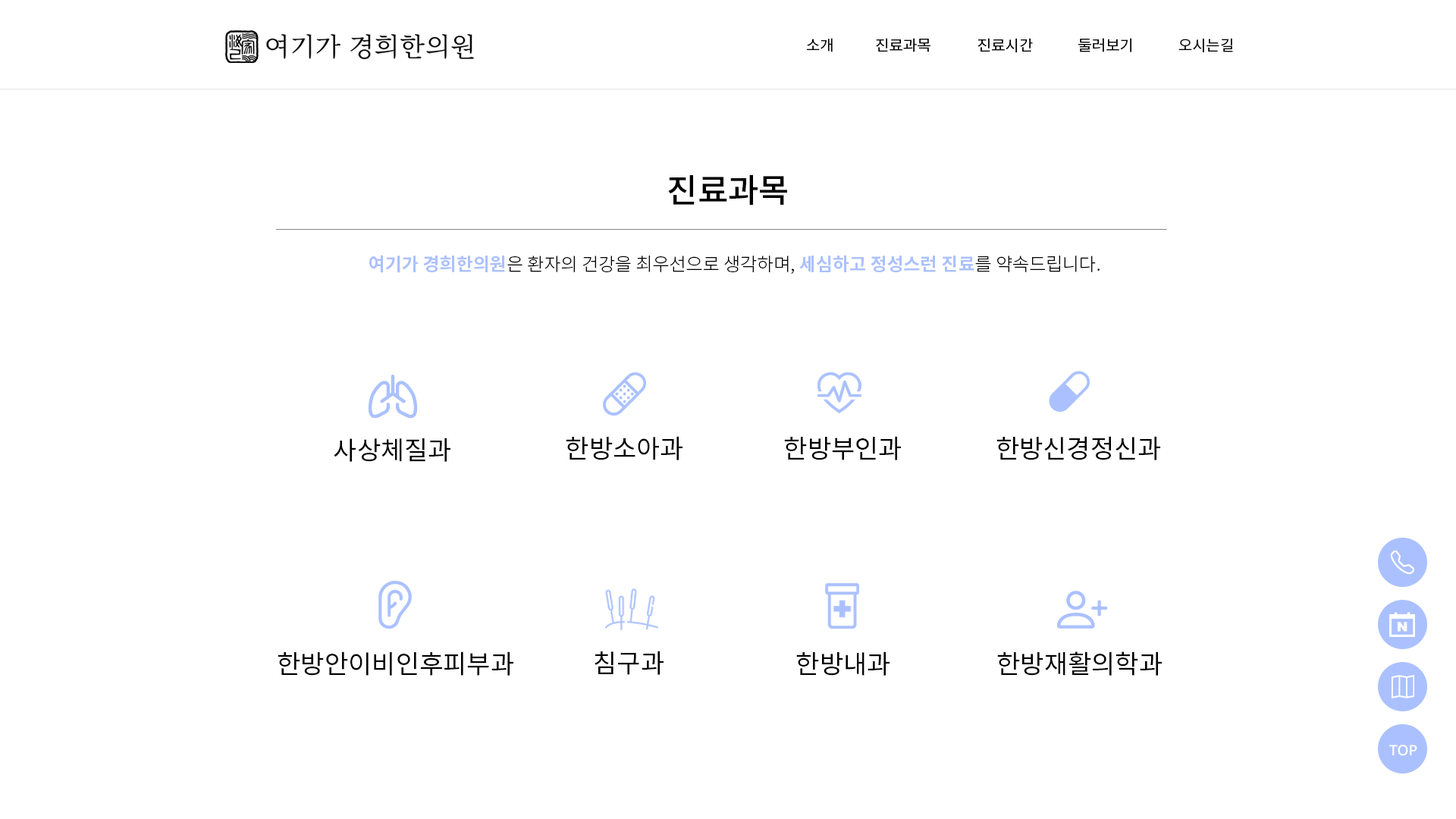
<style>
.page{position:relative;width:1456px;height:819px;background:#ffffff}
.page>*{position:absolute;margin:0}
.t1{font:15.2px "NotoSansKR-Regular";color:#000000}
.t2{font:33.4px "NotoSansKR-Medium";color:#000000}
.t3{font:18.2px "NotoSansKR-Light";color:#000000}
.t4{font:18.2px "NotoSansKR-Bold";color:#abc1ff}
.t5{font:25.8px "NotoSansKR-Regular";color:#000000}
.t6{font:14.4px "NotoSans-Medium";color:#ffffff}
</style>
<div class="page">
<p class="t1" style="left:806px;top:38px;width:27px;height:14px">소개</p>
<p class="t1" style="left:876px;top:38px;width:54px;height:14px">진료과목</p>
<p class="t1" style="left:977px;top:38px;width:56px;height:14px">진료시간</p>
<p class="t1" style="left:1078px;top:38px;width:53px;height:14px">둘러보기</p>
<p class="t1" style="left:1178px;top:38px;width:55px;height:14px">오시는길</p>
<p class="t2" style="left:668px;top:174px;width:119px;height:32px">진료과목</p>
<p class="t3" style="left:369px;top:255px;width:731px;height:19px"><span class="t4">여기가 경희한의원</span>은 환자의 건강을 최우선으로 생각하며, <span class="t4">세심하고 정성스런 진료</span>를 약속드립니다.</p>
<p class="t5" style="left:334px;top:438px;width:116px;height:24px">사상체질과</p>
<p class="t5" style="left:566px;top:436px;width:116px;height:24px">한방소아과</p>
<p class="t5" style="left:784px;top:436px;width:117px;height:24px">한방부인과</p>
<p class="t5" style="left:996px;top:436px;width:164px;height:24px">한방신경정신과</p>
<p class="t5" style="left:278px;top:651px;width:235px;height:25px">한방안이비인후피부과</p>
<p class="t5" style="left:595px;top:651px;width:69px;height:24px">침구과</p>
<p class="t5" style="left:796px;top:651px;width:94px;height:25px">한방내과</p>
<p class="t5" style="left:997px;top:651px;width:165px;height:25px">한방재활의학과</p>
<p class="t6" style="left:1389px;top:745px;width:28px;height:11px">TOP</p>
</div>
